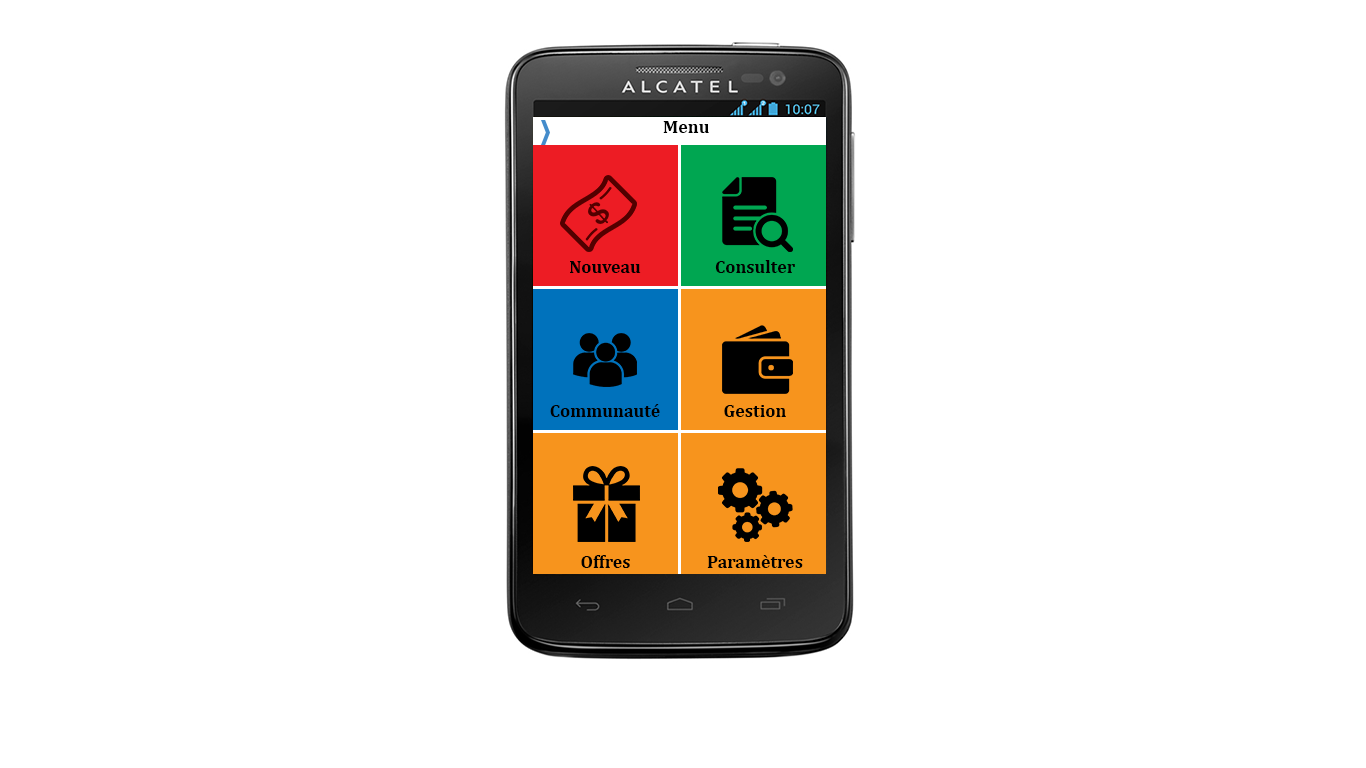
<style>
.page{position:relative;width:1366px;height:768px;background:#ffffff}
.page>*{position:absolute;margin:0}
.t1{font:18px "Cambria-Bold";color:#000101}
.t2{font:18px "Cambria-Bold";color:#000000}
</style>
<div class="page">
<p class="t1" style="left:663px;top:121px;width:46px;height:12px">Menu</p>
<p class="t2" style="left:570px;top:261px;width:71px;height:12px">Nouveau</p>
<p class="t2" style="left:715px;top:260px;width:80px;height:13px">Consulter</p>
<p class="t2" style="left:550px;top:404px;width:110px;height:13px">Communauté</p>
<p class="t2" style="left:724px;top:405px;width:62px;height:12px">Gestion</p>
<p class="t2" style="left:581px;top:555px;width:49px;height:13px">Offres</p>
<p class="t2" style="left:707px;top:555px;width:96px;height:13px">Paramètres</p>
</div>
